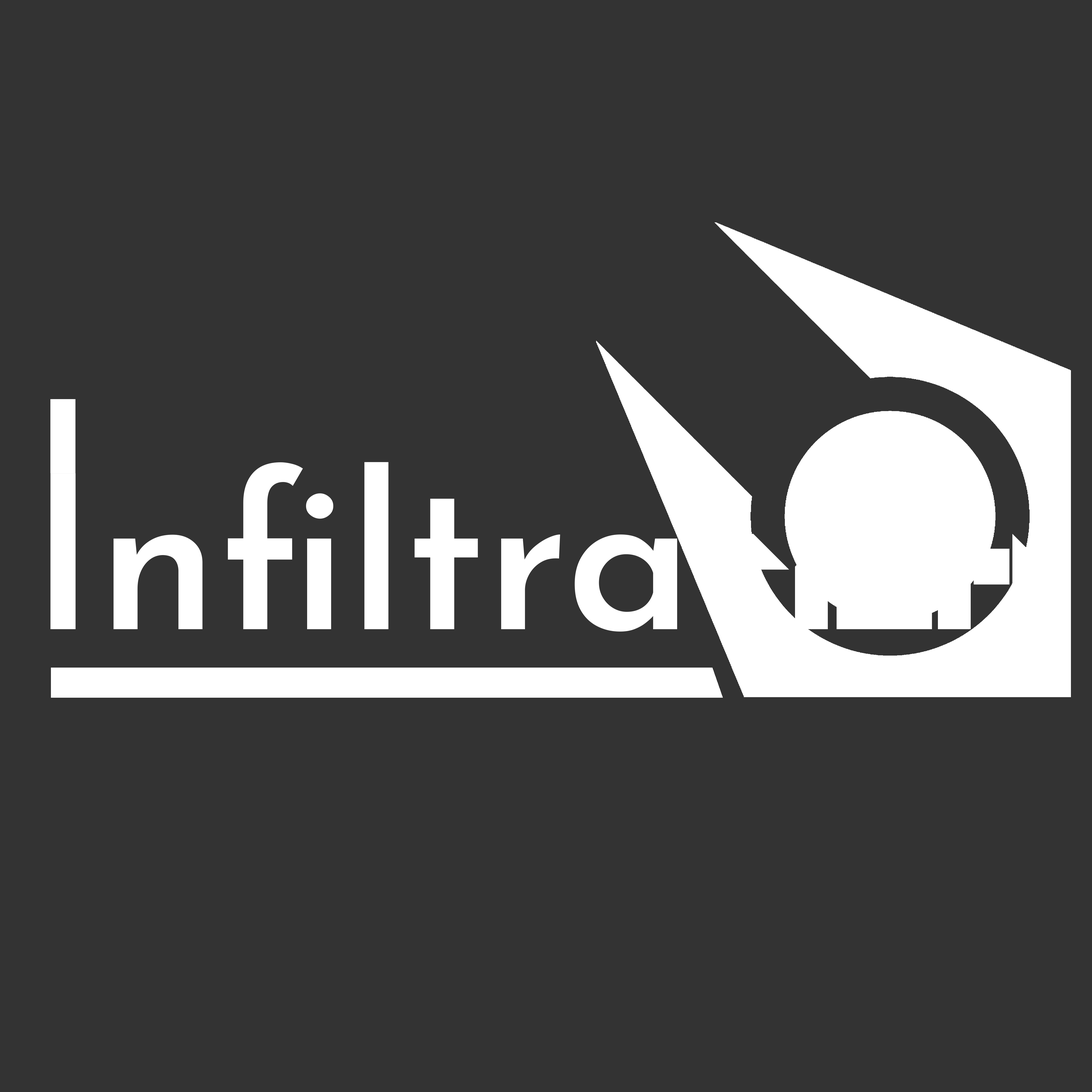
<style>
.page{position:relative;width:1092px;height:1092px;background:#333333}
.page>*{position:absolute;margin:0}
.t1{font:214.2px "JosefinSans-SemiBold";color:#ffffff}
.t2{font:95.4px "Universal-Union";color:#ffffff}
</style>
<div class="page">
<p class="t1" style="left:50px;top:462px;width:983px;height:170px">Infiltra<span class="t2">tion</span></p>
</div>
